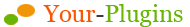
<style>
.page{position:relative;width:190px;height:27px;background:#ffffff}
.page>*{position:absolute;margin:0}
.t1{font:24px "Vani";color:#68b505}
.t2{font:24px "Vani";color:#f85607}
.t3{font:24px "Vani";color:#3c3c3c}
</style>
<div class="page">
<p class="t1" style="left:43px;top:4px;width:140px;height:23px"><span class="t2">Your</span><span class="t3">-</span>Plugins</p>
</div>
